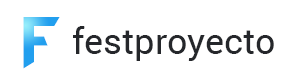
<style>
.page{position:relative;width:284px;height:84px;background:#ffffff}
.page>*{position:absolute;margin:0}
.t1{font:63.8px "AmazObitaemOstrovV.2"}
.t2{font:36px "Roboto-Regular";color:#25272b}
</style>
<div class="page">
<p class="t1" style="left:23px;top:17px;width:37px;height:52px">f</p>
<p class="t2" style="left:73px;top:26px;width:201px;height:35px">festproyecto</p>
</div>
